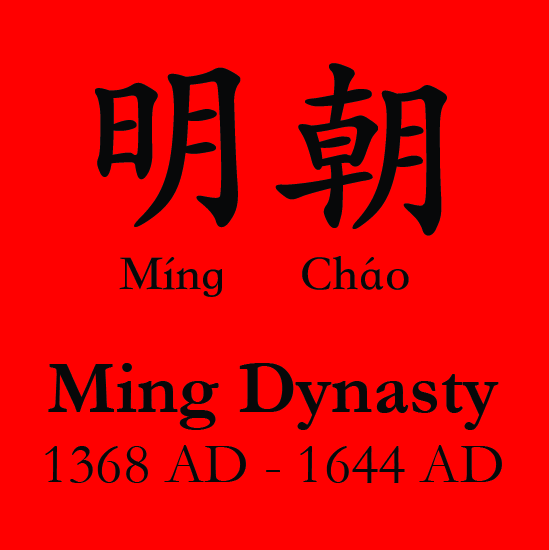
<style>
.page{position:relative;width:549px;height:550px;background:#ff0000}
.page>*{position:absolute;margin:0}
.t1{font:200px "STKaiti-SC-Bold";color:#070809}
.t2{font:50px "STKaiti-SC-Bold";color:#070809}
.t3{font:58.3px "Garamond";color:#070809}
.t4{font:75px "Garamond-Bold";color:#070809}
</style>
<div class="page">
<p class="t1" style="left:95px;top:63px;width:352px;height:173px">明朝</p>
<p class="t2" style="left:119px;top:256px;width:290px;height:41px">Míng      Cháo</p>
<p class="t3" style="left:45px;top:363px;width:457px;height:120px;text-align:center"><span class="t4">Ming Dynasty<br></span>1368 AD - 1644 AD</p>
</div>
